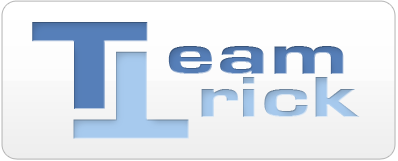
<style>
.page{position:relative;width:398px;height:161px}
.page>*{position:absolute;margin:0}
.t1{font:130.9px "EuroseWideHeavy-Regular";color:#567fb9;scale:1.11 1}
.t2{font:59.5px "EuroseWideHeavy-Regular";color:#567fb9;scale:1.11 1}
.t3{font:60px "EuroseWideHeavy-Regular";color:#a7caee;scale:1.11 1}
</style>
<div class="page">
<p class="t1" style="left:32px;top:22px;width:116px;height:87px">T</p>
<p class="t2" style="left:168px;top:46px;width:176px;height:28px">eam</p>
<p class="t3" style="left:201px;top:77px;width:159px;height:40px">rick</p>
</div>
